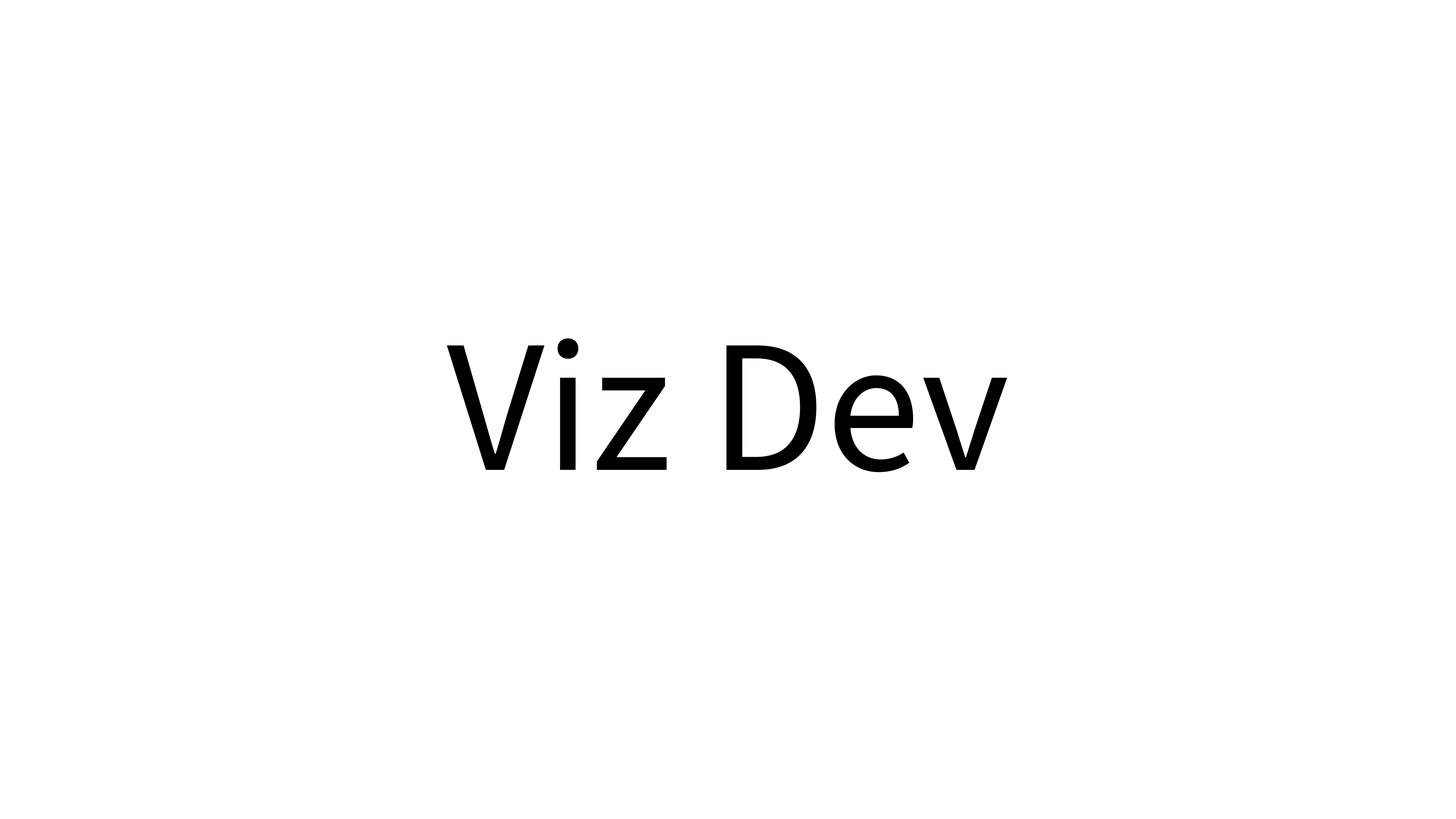
<style>
.page{position:relative;width:1456px;height:819px;background:#ffffff}
.page>*{position:absolute;margin:0}
.t1{font:189.6px "SourceSansRoman-Regular";color:#000000}
</style>
<div class="page">
<p class="t1" style="left:447px;top:338px;width:560px;height:134px">Viz Dev</p>
</div>
